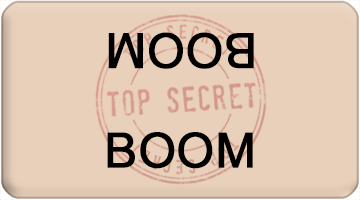
<style>
.page{position:relative;width:360px;height:200px;background:#e8d0bb}
.page>*{position:absolute;margin:0}
.t1{font:48px "ArialMT";color:#000000;font-weight:bold}
</style>
<div class="page">
<p class="t1" style="left:108px;top:32px;width:146px;height:37px;rotate:180deg">BOOM</p>
<p class="t1" style="left:107px;top:132px;width:146px;height:37px">BOOM</p>
</div>
